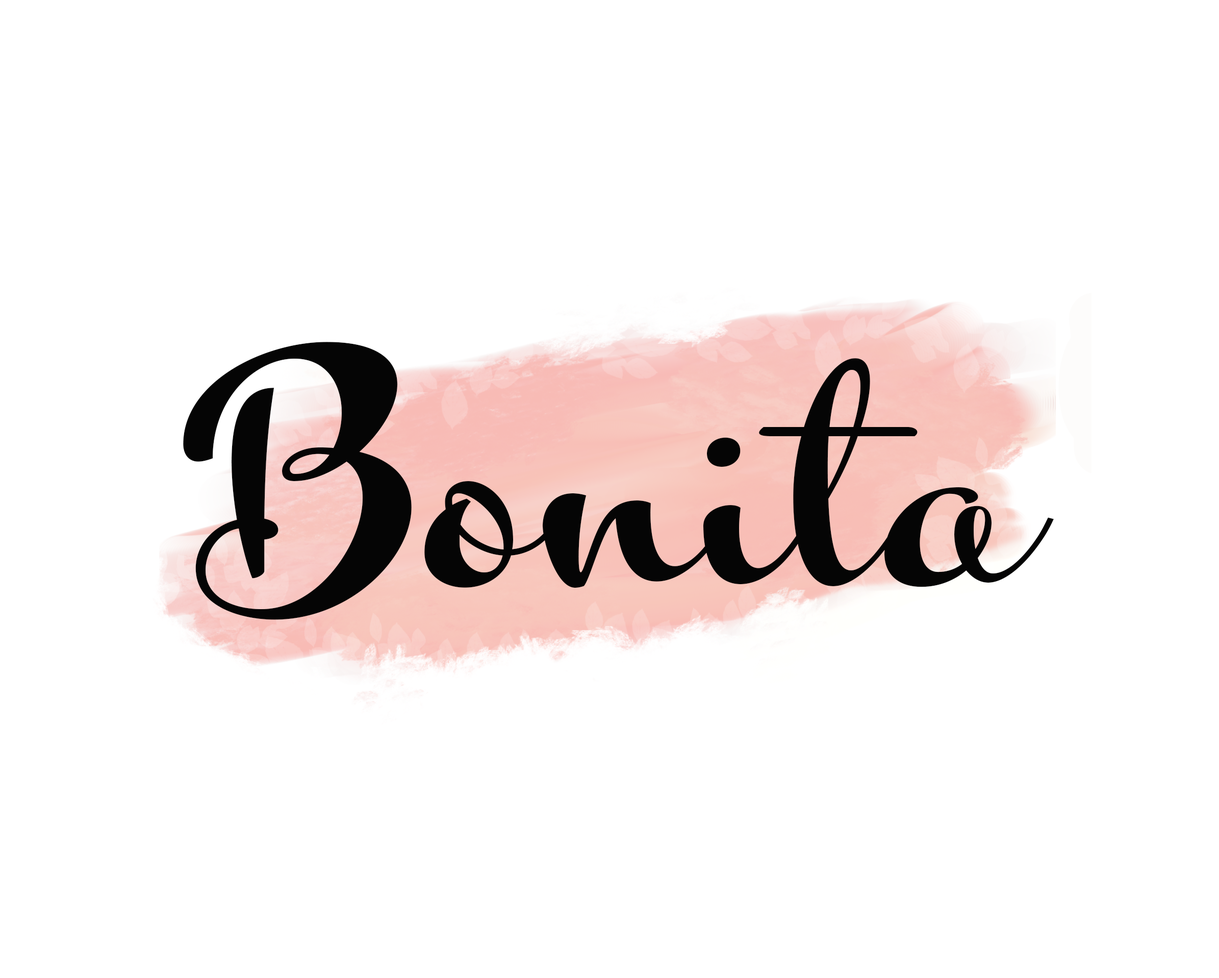
<style>
.page{position:relative;width:1219px;height:978px;background:#ffffff}
.page>*{position:absolute;margin:0}
.t1{font:297.6px "KewlScript";color:#050505}
</style>
<div class="page">
<p class="t1" style="left:183px;top:342px;width:871px;height:278px">Bonita</p>
</div>
